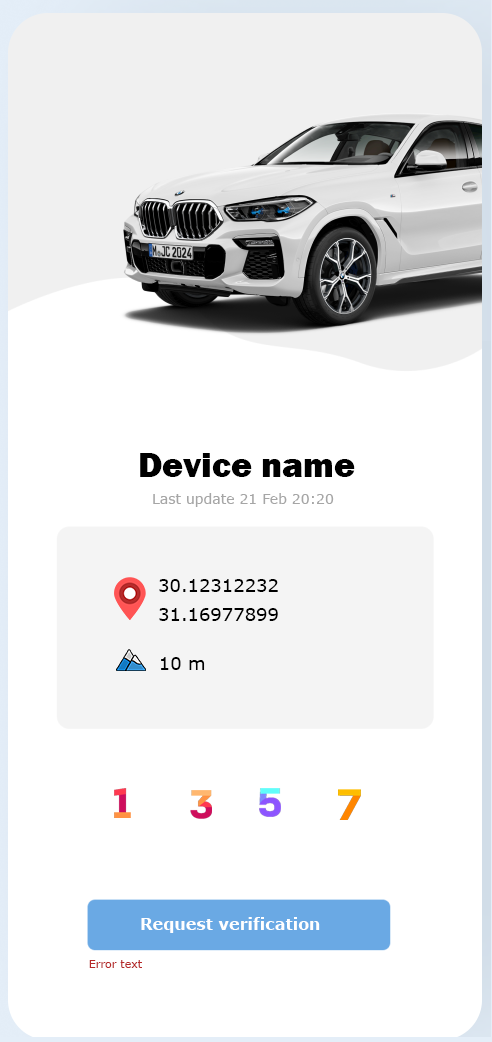
<style>
.page{position:relative;width:492px;height:1042px;background:#ffffff}
.page>*{position:absolute;margin:0}
.t1{font:36px "FranklinGothic-Heavy";color:#000000}
.t2{font:14px "Verdana";color:#a6a6a6}
.t3{font:18px "Verdana";color:#000000}
.t4{font:16px "Verdana-Bold";color:#ffffff}
.t5{font:11px "Verdana";color:#b62929}
</style>
<div class="page">
<p class="t1" style="left:140px;top:453px;width:215px;height:24px">Device name</p>
<p class="t2" style="left:153px;top:493px;width:181px;height:14px">Last update 21 Feb 20:20</p>
<p class="t3" style="left:159px;top:579px;width:119px;height:13px">30.12312232</p>
<p class="t3" style="left:159px;top:608px;width:119px;height:13px">31.16977899</p>
<p class="t3" style="left:161px;top:657px;width:44px;height:13px">10 m</p>
<p class="t4" style="left:141px;top:917px;width:179px;height:16px">Request verification</p>
<p class="t5" style="left:89px;top:960px;width:53px;height:8px">Error text</p>
</div>
